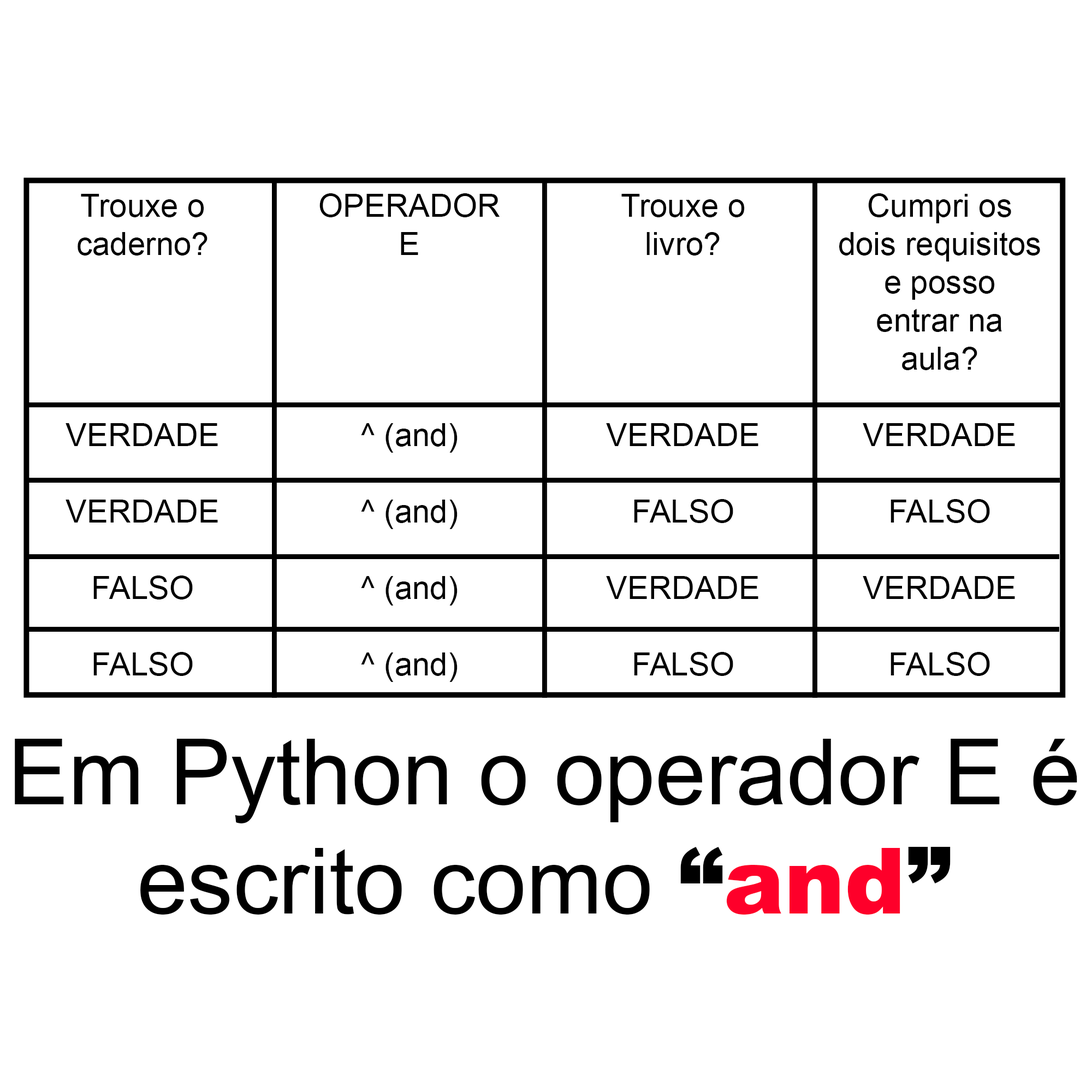
<style>
.page{position:relative;width:1092px;height:1092px;background:#ffffff}
.page>*{position:absolute;margin:0}
.t1{font:31.8px "ArialMT";color:#000000}
.t2{font:91px "ArialMT";color:#000000}
.t3{font:91px "Arial-Black";color:#000000}
.t4{font:91px "Arial-Black";color:#fe002a}
</style>
<div class="page">
<p class="t1" style="left:66px;top:194px;width:152px;height:482px;text-align:center">Trouxe o<br>caderno?<br><br><br><br><br>VERDADE<br><br>VERDADE<br><br>FALSO<br><br>FALSO</p>
<p class="t1" style="left:319px;top:193px;width:181px;height:489px;text-align:center">OPERADOR<br>E<br><br><br><br><br>^ (and)<br><br>^ (and)<br><br>^ (and)<br><br>^ (and)</p>
<p class="t1" style="left:606px;top:194px;width:152px;height:482px;text-align:center">Trouxe o<br>livro?<br><br><br><br><br>VERDADE<br><br>FALSO<br><br>VERDADE<br><br>FALSO</p>
<p class="t1" style="left:839px;top:193px;width:201px;height:483px;text-align:center">Cumpri os<br>dois requisitos<br>e posso<br>entrar na<br>aula?<br><br>VERDADE<br><br>FALSO<br><br>VERDADE<br><br>FALSO</p>
<p class="t2" style="left:15px;top:739px;width:1062px;height:176px;text-align:center">Em Python o operador E é<br>escrito como <span class="t3">“</span><span class="t4">and</span><span class="t3">”</span></p>
</div>
